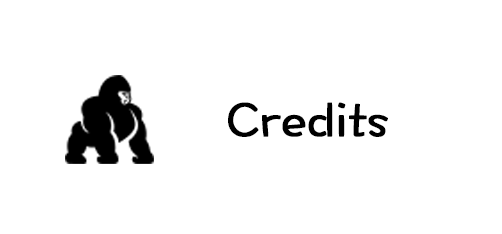
<style>
.page{position:relative;width:502px;height:234px;background:#ffffff}
.page>*{position:absolute;margin:0}
.t1{font:50px "DFWaWaTC-W5";color:#000000;font-weight:bold}
</style>
<div class="page">
<p class="t1" style="left:228px;top:102px;width:160px;height:35px">Credits</p>
</div>
